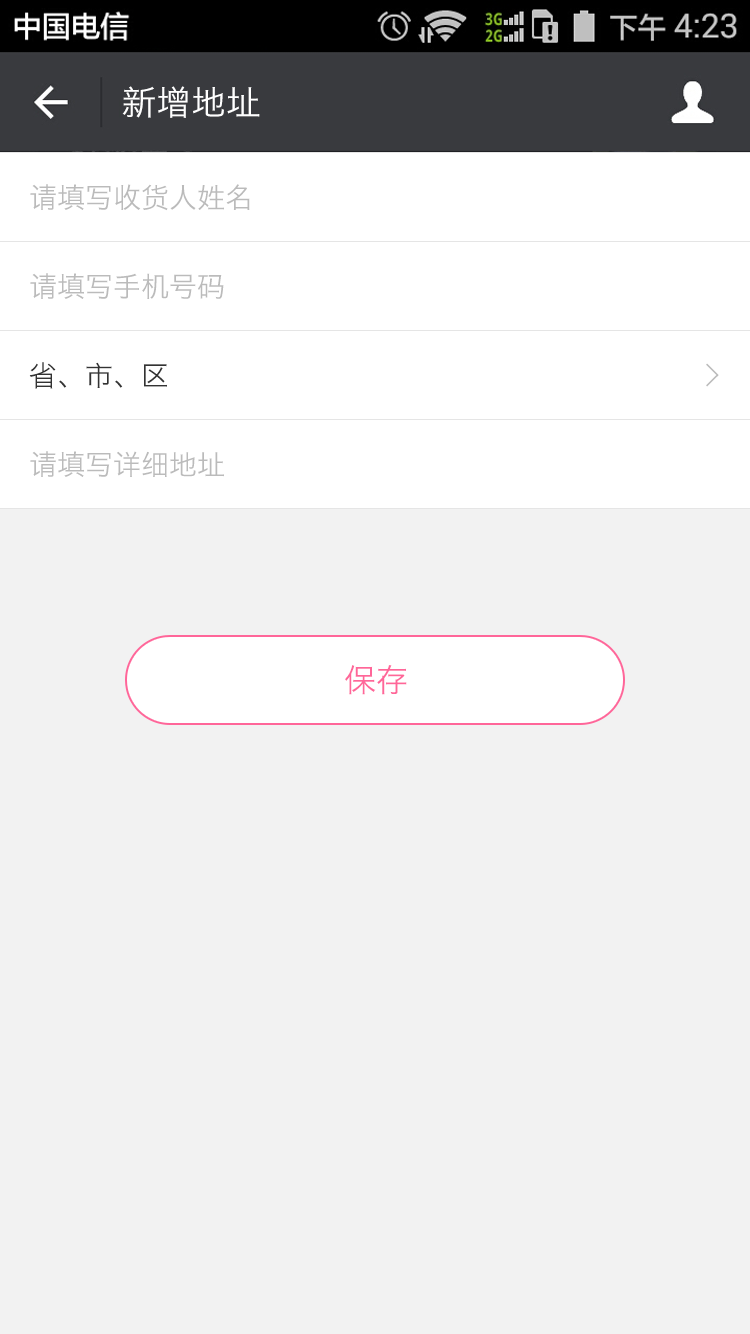
<style>
.page{position:relative;width:750px;height:1334px;background:#f2f2f2}
.page>*{position:absolute;margin:0}
.t1{font:34px "HiraginoSansGB-W3";letter-spacing:0.022em;color:#ffffff}
.t2{font:28px "HiraginoSansGB-W3";color:#bbbbbb}
.t3{font:28px "HiraginoSansGB-W3";color:#333333}
.t4{font:32px "SimSun";color:#bbbbbb;font-weight:bold}
.t5{font:32px "HiraginoSansGB-W3";color:#ff6699}
</style>
<div class="page">
<p class="t1" style="left:122px;top:86px;width:138px;height:32px">新增地址</p>
<p class="t2" style="left:30px;top:184px;width:220px;height:27px">请填写收货人姓名</p>
<p class="t2" style="left:30px;top:273px;width:194px;height:26px">请填写手机号码</p>
<p class="t3" style="left:29px;top:362px;width:138px;height:27px">省、市、区</p>
<p class="t4" style="left:706px;top:363px;width:13px;height:24px">&gt;</p>
<p class="t2" style="left:30px;top:451px;width:194px;height:26px">请填写详细地址</p>
<p class="t5" style="left:345px;top:665px;width:62px;height:30px">保存</p>
</div>
